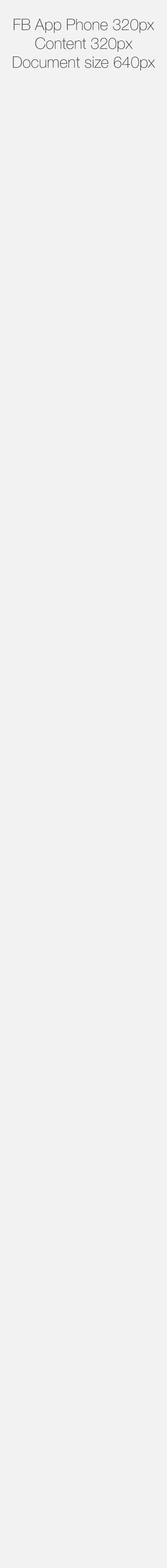
<style>
.page{position:relative;width:167px;height:1568px;background:#f2f2f2}
.page>*{position:absolute;margin:0}
.t1{font:15.7px "HelveticaNeue-Thin";color:#373737}
</style>
<div class="page">
<p class="t1" style="left:13px;top:19px;width:142px;height:52px;text-align:center">FB App Phone 320px<br>Content 320px<br>Document size 640px</p>
</div>
